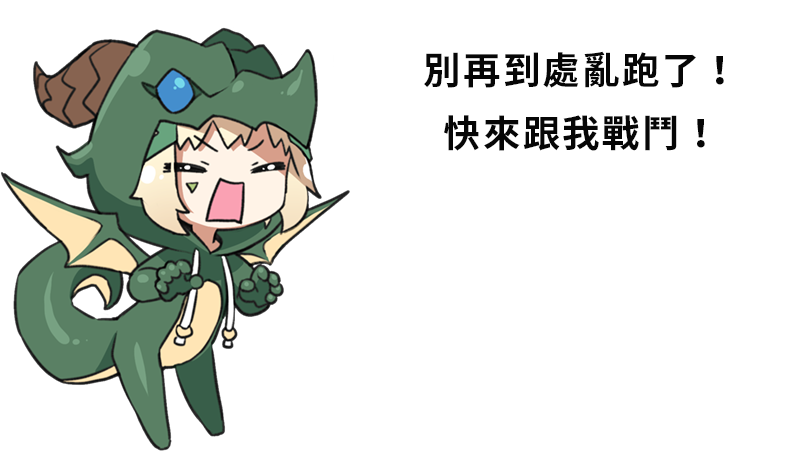
<style>
.page{position:relative;width:799px;height:451px;background:#ffffff}
.page>*{position:absolute;margin:0}
.t1{font:37.5px/62.5px "NotoSansCJKtc-Bold";letter-spacing:0.06em;color:#060606}
</style>
<div class="page">
<p class="t1" style="left:424px;top:51px;width:300px;height:100px;text-align:center">別再到處亂跑了！<br>快來跟我戰鬥！</p>
</div>
